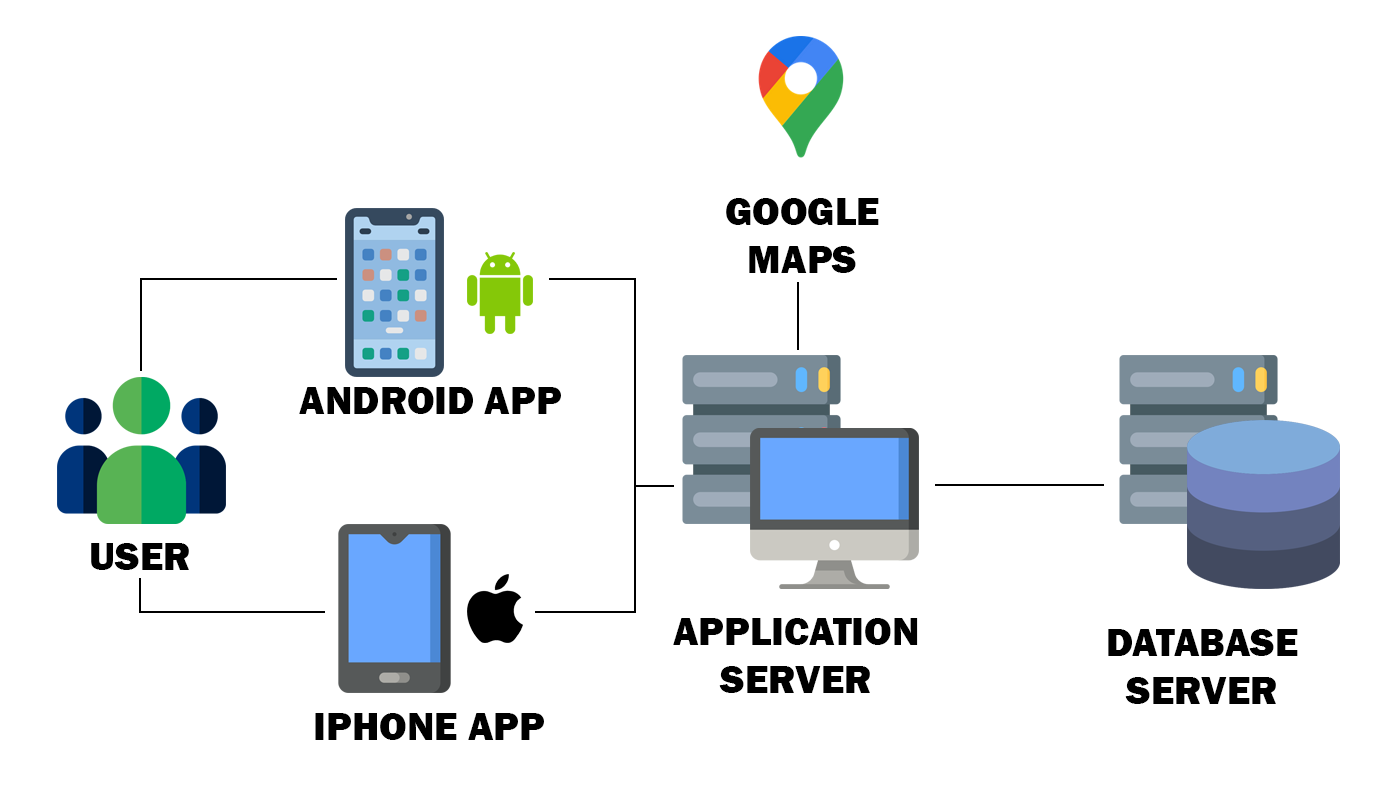
<style>
.page{position:relative;width:1400px;height:800px;background:#ffffff}
.page>*{position:absolute;margin:0}
.t1{font:40px "FranklinGothic-Heavy";color:#000000}
</style>
<div class="page">
<p class="t1" style="left:726px;top:198px;width:153px;height:75px;text-align:center">GOOGLE<br>MAPS</p>
<p class="t1" style="left:299px;top:387px;width:262px;height:27px">ANDROID APP</p>
<p class="t1" style="left:91px;top:543px;width:98px;height:27px">USER</p>
<p class="t1" style="left:673px;top:618px;width:245px;height:75px;text-align:center">APPLICATION<br>SERVER</p>
<p class="t1" style="left:1108px;top:629px;width:190px;height:75px;text-align:center">DATABASE<br>SERVER</p>
<p class="t1" style="left:315px;top:713px;width:229px;height:27px">IPHONE APP</p>
</div>
